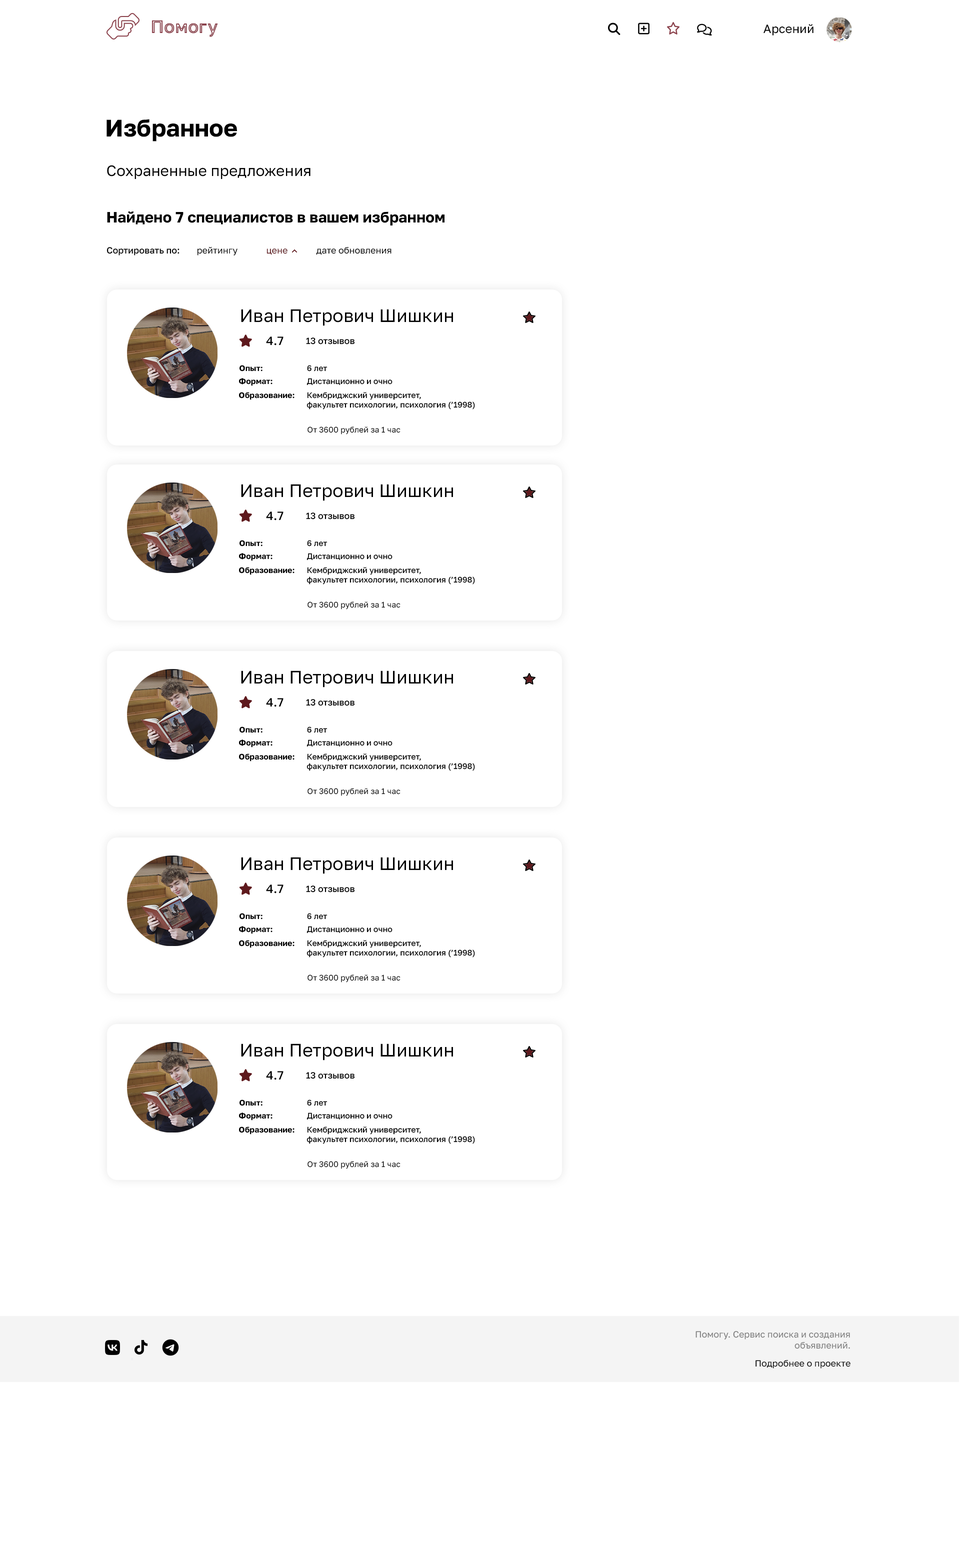
<style>
.page{position:relative;width:960px;height:1564px;background:#ffffff}
.page>*{position:absolute;margin:0}
.t1{font:18px "GolosText-SemiBold";color:#8b424c}
.t2{font:12px "GolosText-Regular";color:#000000}
.t3{font:24px "GolosText-Bold";color:#000000}
.t4{font:15px "GolosText-Regular";color:#000000}
.t5{font:15px "GolosText-Bold";color:#000000}
.t6{font:9px "GolosText-Medium";color:#000000}
.t7{font:9px "GolosText-Regular";color:#000000}
.t8{font:9px "GolosText-Regular";color:#5e191d}
.t9{font:18px "GolosText-Regular";color:#000000}
.t10{font:12px "GolosText-Medium";color:#000000}
.t11{font:8px "GolosText-Bold";color:#000000}
.t12{font:8px "GolosText-Medium";color:#000000}
.t13{font:8px "GolosText-Regular";color:#000000}
.t14{font:9px "GolosText-Regular";color:#7c7c7c}
</style>
<div class="page">
<p class="t1" style="left:152px;top:20px;width:66px;height:17px">Помогу</p>
<p class="t2" style="left:764px;top:24px;width:50px;height:12px">Арсений</p>
<p class="t3" style="left:106px;top:119px;width:131px;height:23px">Избранное</p>
<p class="t4" style="left:107px;top:165px;width:203px;height:14px">Сохраненные предложения</p>
<p class="t5" style="left:107px;top:212px;width:337px;height:14px">Найдено 7 специалистов в вашем избранном</p>
<p class="t6" style="left:106px;top:247px;width:74px;height:9px">Сортировать по:</p>
<p class="t7" style="left:197px;top:246px;width:41px;height:10px">рейтингу</p>
<p class="t8" style="left:266px;top:248px;width:22px;height:7px">цене</p>
<p class="t7" style="left:316px;top:247px;width:76px;height:8px">дате обновления</p>
<p class="t9" style="left:241px;top:309px;width:212px;height:17px">Иван Петрович Шишкин</p>
<p class="t10" style="left:266px;top:336px;width:18px;height:10px">4.7</p>
<p class="t6" style="left:306px;top:338px;width:49px;height:6px">13 отзывов</p>
<p class="t11" style="left:240px;top:365px;width:88px;height:7px">Опыт:                      <span class="t12">6 лет</span></p>
<p class="t12" style="left:239px;top:378px;width:153px;height:8px"><span class="t11">Формат:                 </span>Дистанционно и очно</p>
<p class="t12" style="left:239px;top:392px;width:236px;height:18px"><span class="t11">Образование:      </span>Кембриджский университет,<br>          факультет психологии, психология (’1998)</p>
<p class="t13" style="left:308px;top:426px;width:92px;height:8px">От 3600 рублей за 1 час</p>
<p class="t9" style="left:241px;top:484px;width:212px;height:17px">Иван Петрович Шишкин</p>
<p class="t10" style="left:266px;top:512px;width:18px;height:8px">4.7</p>
<p class="t6" style="left:306px;top:512px;width:49px;height:8px">13 отзывов</p>
<p class="t11" style="left:240px;top:540px;width:88px;height:6px">Опыт:                      <span class="t12">6 лет</span></p>
<p class="t12" style="left:239px;top:553px;width:153px;height:8px"><span class="t11">Формат:                 </span>Дистанционно и очно</p>
<p class="t12" style="left:239px;top:567px;width:236px;height:17px"><span class="t11">Образование:      </span>Кембриджский университет,<br>          факультет психологии, психология (’1998)</p>
<p class="t13" style="left:308px;top:602px;width:92px;height:8px">От 3600 рублей за 1 час</p>
<p class="t9" style="left:241px;top:670px;width:212px;height:18px">Иван Петрович Шишкин</p>
<p class="t10" style="left:266px;top:698px;width:18px;height:9px">4.7</p>
<p class="t6" style="left:306px;top:699px;width:49px;height:7px">13 отзывов</p>
<p class="t11" style="left:240px;top:726px;width:88px;height:7px">Опыт:                      <span class="t12">6 лет</span></p>
<p class="t12" style="left:239px;top:740px;width:153px;height:8px"><span class="t11">Формат:                 </span>Дистанционно и очно</p>
<p class="t12" style="left:239px;top:754px;width:236px;height:17px"><span class="t11">Образование:      </span>Кембриджский университет,<br>          факультет психологии, психология (’1998)</p>
<p class="t13" style="left:308px;top:788px;width:92px;height:8px">От 3600 рублей за 1 час</p>
<p class="t9" style="left:241px;top:857px;width:212px;height:17px">Иван Петрович Шишкин</p>
<p class="t10" style="left:266px;top:884px;width:18px;height:10px">4.7</p>
<p class="t6" style="left:306px;top:886px;width:49px;height:6px">13 отзывов</p>
<p class="t11" style="left:240px;top:913px;width:88px;height:7px">Опыт:                      <span class="t12">6 лет</span></p>
<p class="t12" style="left:239px;top:926px;width:153px;height:8px"><span class="t11">Формат:                 </span>Дистанционно и очно</p>
<p class="t12" style="left:239px;top:940px;width:236px;height:18px"><span class="t11">Образование:      </span>Кембриджский университет,<br>          факультет психологии, психология (’1998)</p>
<p class="t13" style="left:308px;top:974px;width:92px;height:8px">От 3600 рублей за 1 час</p>
<p class="t9" style="left:241px;top:1044px;width:212px;height:16px">Иван Петрович Шишкин</p>
<p class="t10" style="left:266px;top:1071px;width:18px;height:9px">4.7</p>
<p class="t6" style="left:306px;top:1072px;width:49px;height:7px">13 отзывов</p>
<p class="t11" style="left:240px;top:1100px;width:88px;height:6px">Опыт:                      <span class="t12">6 лет</span></p>
<p class="t12" style="left:239px;top:1112px;width:153px;height:8px"><span class="t11">Формат:                 </span>Дистанционно и очно</p>
<p class="t12" style="left:239px;top:1126px;width:236px;height:18px"><span class="t11">Образование:      </span>Кембриджский университет,<br>          факультет психологии, психология (’1998)</p>
<p class="t13" style="left:308px;top:1161px;width:92px;height:8px">От 3600 рублей за 1 час</p>
<p class="t14" style="left:696px;top:1331px;width:154px;height:18px;text-align:right">Помогу. Сервис поиска и создания<br>объявлений.</p>
<p class="t7" style="left:756px;top:1360px;width:94px;height:8px">Подробнее о проекте</p>
</div>
